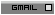
<style>
.page{position:relative;width:55px;height:15px;background:#7f7f7f}
.page>*{position:absolute;margin:0}
.t1{font:8px "BitDustTwo";color:#000000}
</style>
<div class="page">
<p class="t1" style="left:12px;top:5px;width:25px;height:5px">GMAIL</p>
</div>
